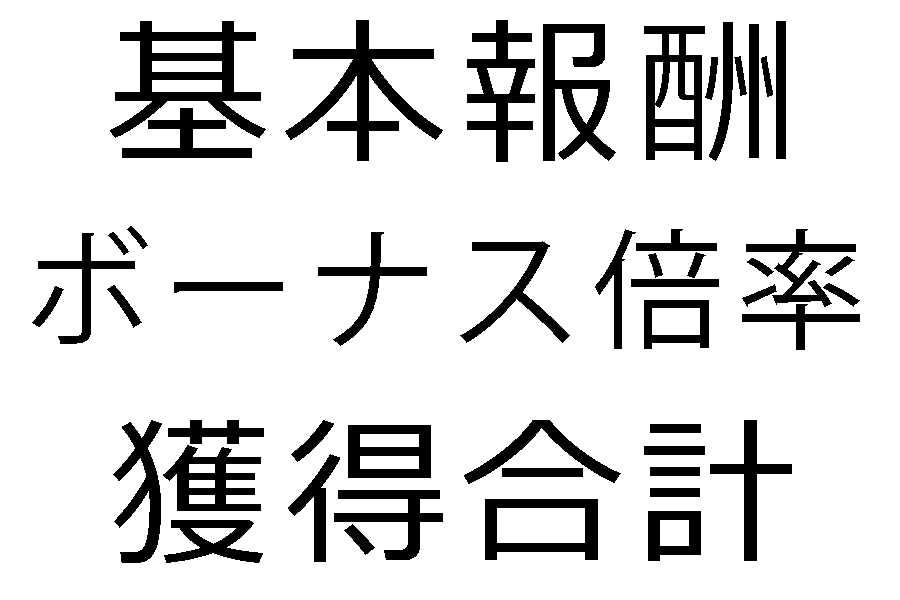
<style>
.page{position:relative;width:900px;height:600px;background:#ffffff}
.page>*{position:absolute;margin:0}
.t1{font:160px "Meiryo";letter-spacing:0.1em;color:#000000}
.t2{font:130px "KozGoPr6N-Regular";letter-spacing:0.1em;color:#000000}
</style>
<div class="page">
<p class="t1" style="left:110px;top:20px;width:676px;height:142px">基本報酬</p>
<p class="t2" style="left:32px;top:226px;width:828px;height:124px">ボーナス倍率</p>
<p class="t1" style="left:113px;top:420px;width:679px;height:143px">獲得合計</p>
</div>
